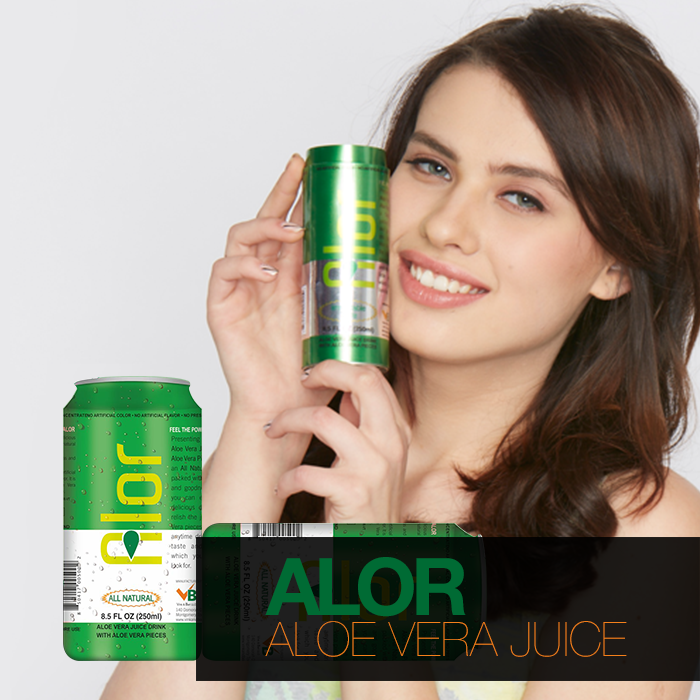
<style>
.page{position:relative;width:700px;height:700px}
.page>*{position:absolute;margin:0}
.t1{font:47.7px/40.5px "HelveticaNeue-UltraLight";color:#f4801b;text-transform:uppercase}
.t2{font:79.5px/40.5px "HelveticaNeue-Bold";letter-spacing:-0.075em;color:#006b34}
</style>
<div class="page">
<p class="t1" style="left:265px;top:557px;width:362px;height:100px"><span class="t2">ALOR <br></span>Aloe Vera Juice</p>
</div>
